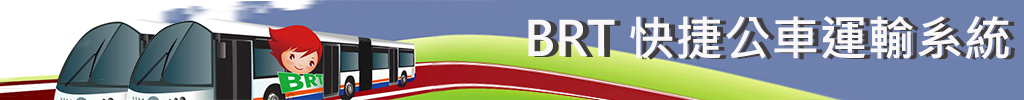
<style>
.page{position:relative;width:1024px;height:100px;background:#6e80ae}
.page>*{position:absolute;margin:0}
.t1{font:48px "MicrosoftJhengHeiBold";color:#f9f7f7}
.t2{font:48px "MicrosoftJhengHeiBold"}
</style>
<div class="page">
<p class="t1" style="left:528px;top:16px;width:481px;height:43px">BRT快捷公車運輸系統</p>
<p class="t2" style="left:534px;top:17px;width:481px;height:43px">BRT快捷公車運輸系統</p>
</div>
